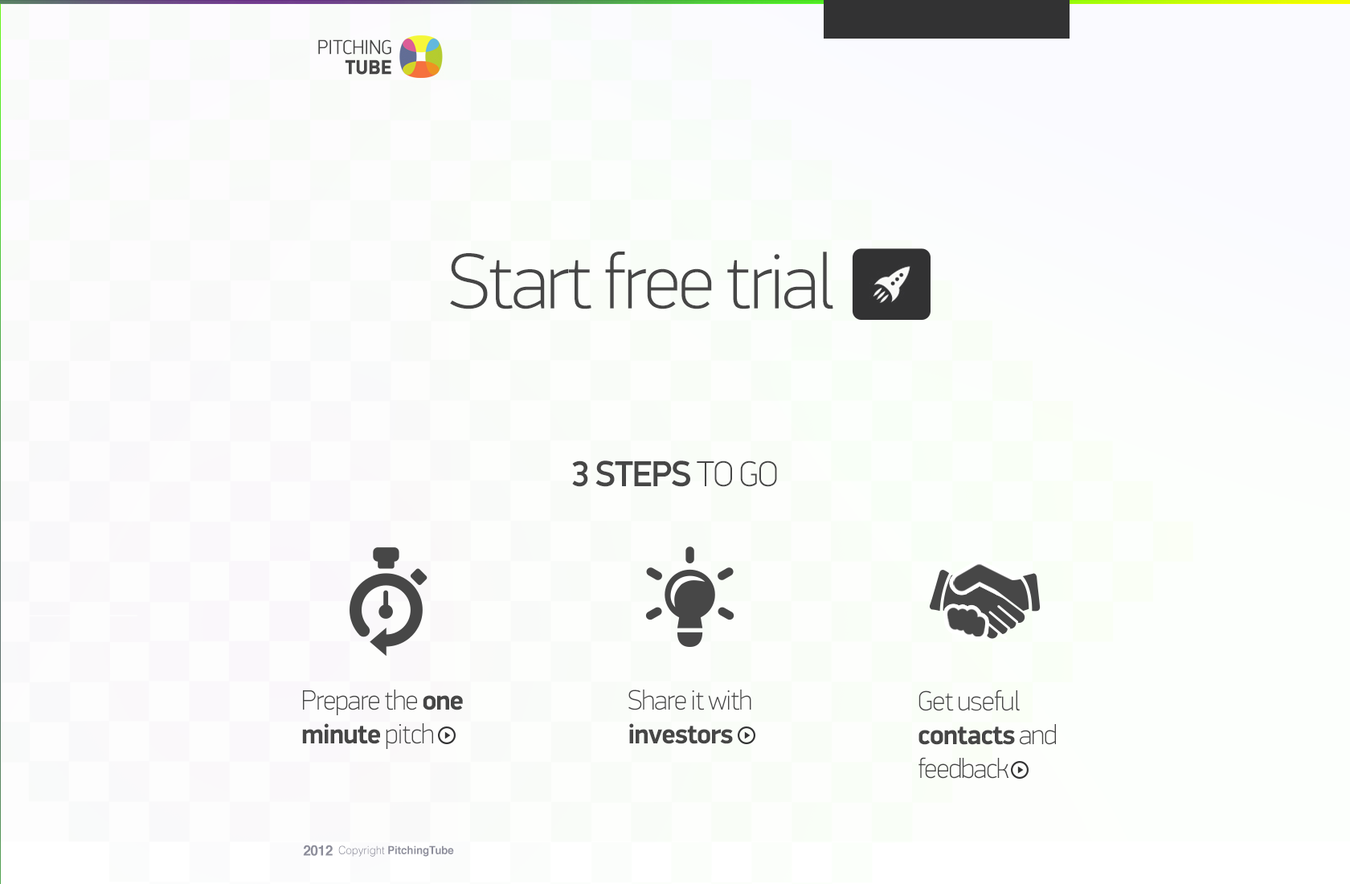
<style>
.page{position:relative;width:1350px;height:884px}
.page>*{position:absolute;margin:0}
.t1{font:20.3px/20.1px "DinDisplayProPF-Light";color:#464646;text-transform:uppercase;scale:0.96 1}
.t2{font:20.3px/20.1px "DinDisplayProPF-Black";color:#464646;text-transform:uppercase;scale:0.96 1}
.t3{font:79.1px "DinDisplayProPF-Thin";letter-spacing:-0.03em;color:#464646}
.t4{font:36.1px "DinDisplayProPF-Medium";letter-spacing:-0.03em;color:#464646;text-transform:uppercase}
.t5{font:36.1px "DinDisplayProPF-Thin";letter-spacing:-0.03em;color:#464646;text-transform:uppercase}
.t6{font:28.1px "DinDisplayProPF-Thin";letter-spacing:-0.03em;color:#464646}
.t7{font:28.1px "DinDisplayProPF-Bold";letter-spacing:-0.03em;color:#464646}
.t8{font:14.1px "Helvetica-Bold";letter-spacing:-0.025em;color:#8d8e9b}
.t9{font:11px "Helvetica-Bold";color:#8d8e9b;scale:0.96 1}
.t10{font:11px "Helvetica-Light";color:#8d8e9b;scale:0.96 1}
</style>
<div class="page">
<p class="t1" style="left:318px;top:39px;width:73px;height:36px;text-align:right">Pitching<br><span class="t2">Tube</span></p>
<p class="t3" style="left:450px;top:251px;width:383px;height:58px">Start free trial</p>
<p class="t4" style="left:572px;top:460px;width:205px;height:27px">3 steps<span class="t5"> to go</span></p>
<p class="t6" style="left:302px;top:689px;width:161px;height:60px">Prepare the <span class="t7">one <br>minute</span> pitch</p>
<p class="t6" style="left:628px;top:689px;width:123px;height:55px">Share it with <br><span class="t7">investors</span></p>
<p class="t6" style="left:918px;top:689px;width:138px;height:89px">Get useful <br><span class="t7">contacts </span>and <br>feedback</p>
<p class="t8" style="left:303px;top:844px;width:30px;height:11px">2012</p>
<p class="t9" style="left:338px;top:845px;width:116px;height:11px"><span class="t10">Copyright </span>PitchingTube</p>
</div>
